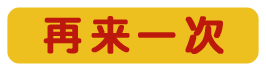
<style>
.page{position:relative;width:266px;height:71px;background:#edbf1f}
.page>*{position:absolute;margin:0}
.t1{font:40px "JCuYuan";letter-spacing:0.15em;color:#bc180c;font-weight:bold}
</style>
<div class="page">
<p class="t1" style="left:43px;top:16px;width:181px;height:38px">再来一次</p>
</div>
